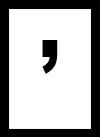
<style>
.page{position:relative;width:100px;height:137px;background:#ffffff}
.page>*{position:absolute;margin:0}
.t1{font:86.1px "Arial-Black";color:#000000;scale:0.81 1}
</style>
<div class="page">
<p class="t1" style="left:42px;top:40px;width:16px;height:34px">’</p>
</div>
